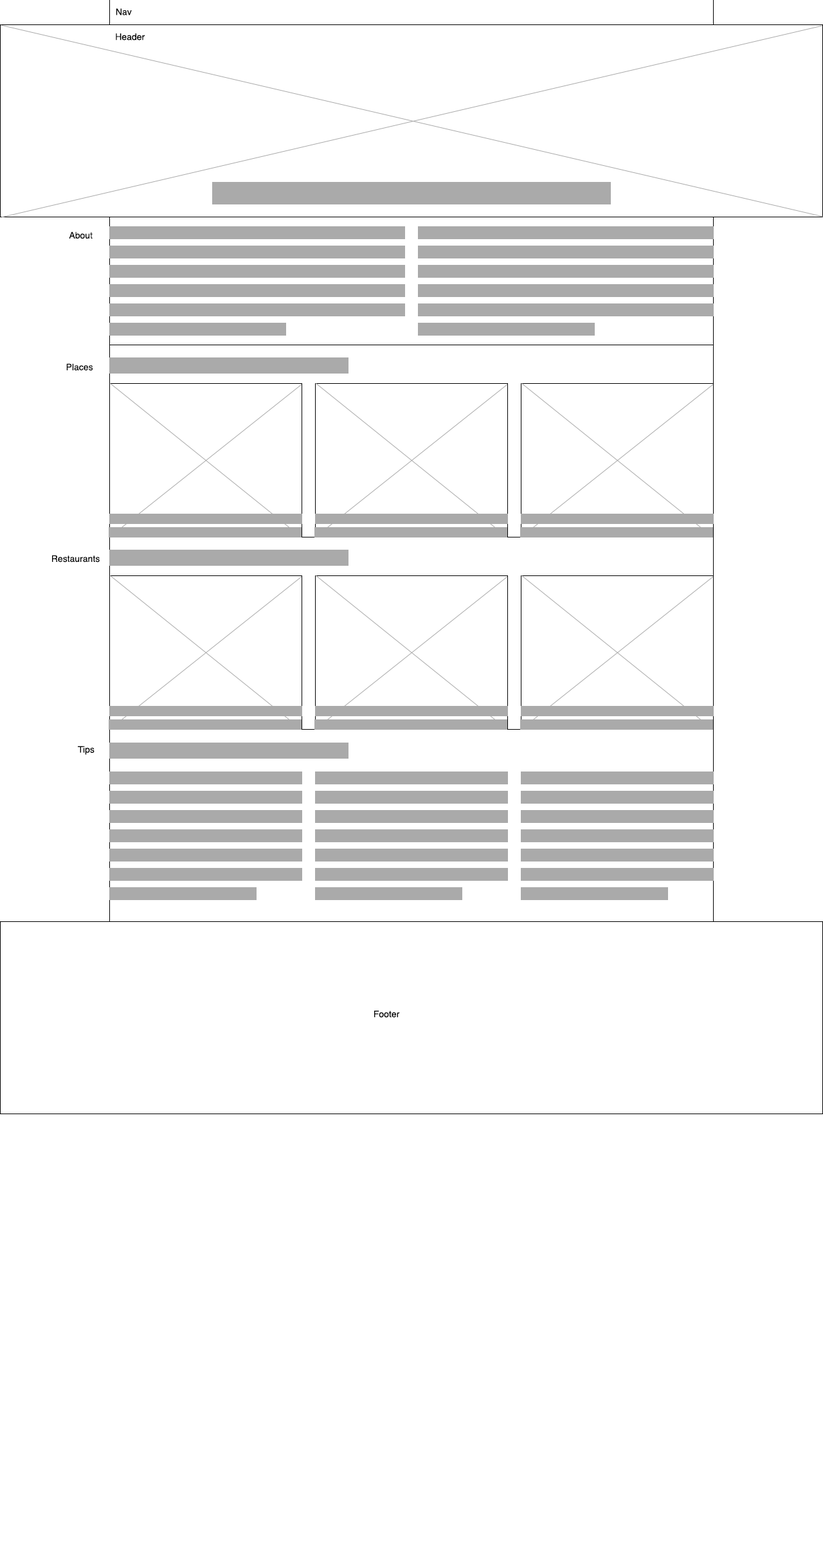
<style>
.page{position:relative;width:823px;height:1543px;background:#ffffff}
.page>*{position:absolute;margin:0}
.t1{font:9px "Helvetica";color:#000000}
</style>
<div class="page">
<p class="t1" style="left:116px;top:8px;width:16px;height:7px">Nav</p>
<p class="t1" style="left:116px;top:33px;width:29px;height:7px">Header</p>
<p class="t1" style="left:69px;top:231px;width:24px;height:8px">About</p>
<p class="t1" style="left:66px;top:363px;width:27px;height:8px">Places</p>
<p class="t1" style="left:52px;top:555px;width:48px;height:7px">Restaurants</p>
<p class="t1" style="left:78px;top:746px;width:16px;height:9px">Tips</p>
<p class="t1" style="left:374px;top:1011px;width:26px;height:7px">Footer</p>
</div>
